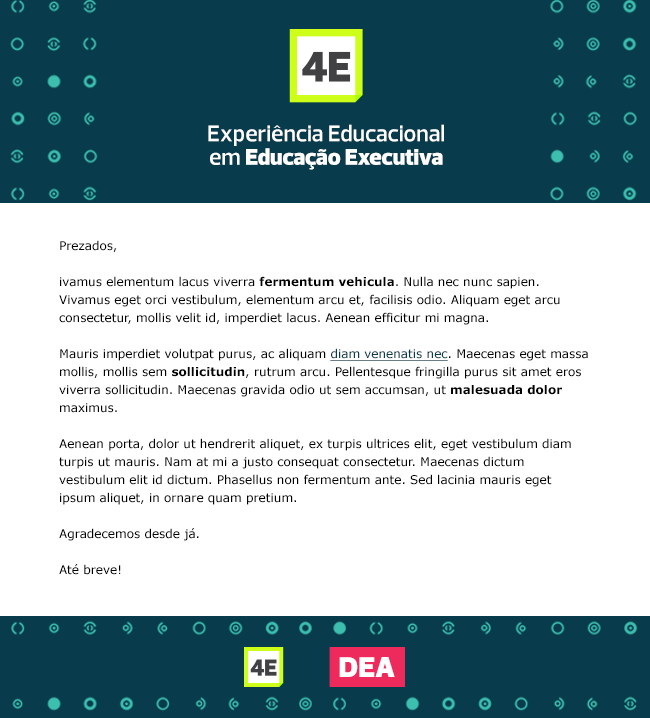
<style>
.page{position:relative;width:650px;height:718px;background:#ffffff}
.page>*{position:absolute;margin:0}
.t1{font:23.5px/23.5px "Prelo-SemiBold";color:#ffffff}
.t2{font:23.5px/23.5px "Prelo-Black";color:#ffffff}
.t3{font:12px/18px "Verdana";color:#000000}
.t4{font:12px/18px "Verdana-Bold";color:#000000}
.t5{font:12px/18px "Verdana";color:#083b4c;text-decoration:underline}
.t6{font:29.4px "Prelo-Black";color:#ffffff}
</style>
<div class="page">
<p class="t1" style="left:208px;top:124px;width:236px;height:46px;text-align:center">Experiência Educacional em <span class="t2">Educação Executiva</span></p>
<p class="t3" style="left:59px;top:240px;width:529px;height:335px">Prezados,<br> <br>ivamus elementum lacus viverra <span class="t4">fermentum vehicula</span>. Nulla nec nunc sapien. Vivamus eget orci vestibulum, elementum arcu et, facilisis odio. Aliquam eget arcu consectetur, mollis velit id, imperdiet lacus. Aenean efficitur mi magna.<br><br>Mauris imperdiet volutpat purus, ac aliquam <span class="t5">diam venenatis nec</span>. Maecenas eget massa mollis, mollis sem <span class="t4">sollicitudin</span>, rutrum arcu. Pellentesque fringilla purus sit amet eros viverra sollicitudin. Maecenas gravida odio ut sem accumsan, ut <span class="t4">malesuada dolor</span> maximus.<br><br>Aenean porta, dolor ut hendrerit aliquet, ex turpis ultrices elit, eget vestibulum diam turpis ut mauris. Nam at mi a justo consequat consectetur. Maecenas dictum vestibulum elit id dictum. Phasellus non fermentum ante. Sed lacinia mauris eget ipsum aliquet, in ornare quam pretium.<br><br>Agradecemos desde já.<br> <br>Até breve!</p>
<p class="t6" style="left:339px;top:657px;width:56px;height:20px">DEA</p>
</div>
